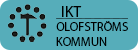
<style>
.page{position:relative;width:138px;height:50px;background:#56adba}
.page>*{position:absolute;margin:0}
.t1{font:15.2px "MyriadPro-Regular";color:#000000}
.t2{font:12.2px "MyriadPro-Regular";color:#000000}
</style>
<div class="page">
<p class="t1" style="left:62px;top:6px;width:20px;height:11px">IKT</p>
<p class="t2" style="left:56px;top:21px;width:72px;height:25px">OLOFSTRÖMS<br>KOMMUN</p>
</div>
